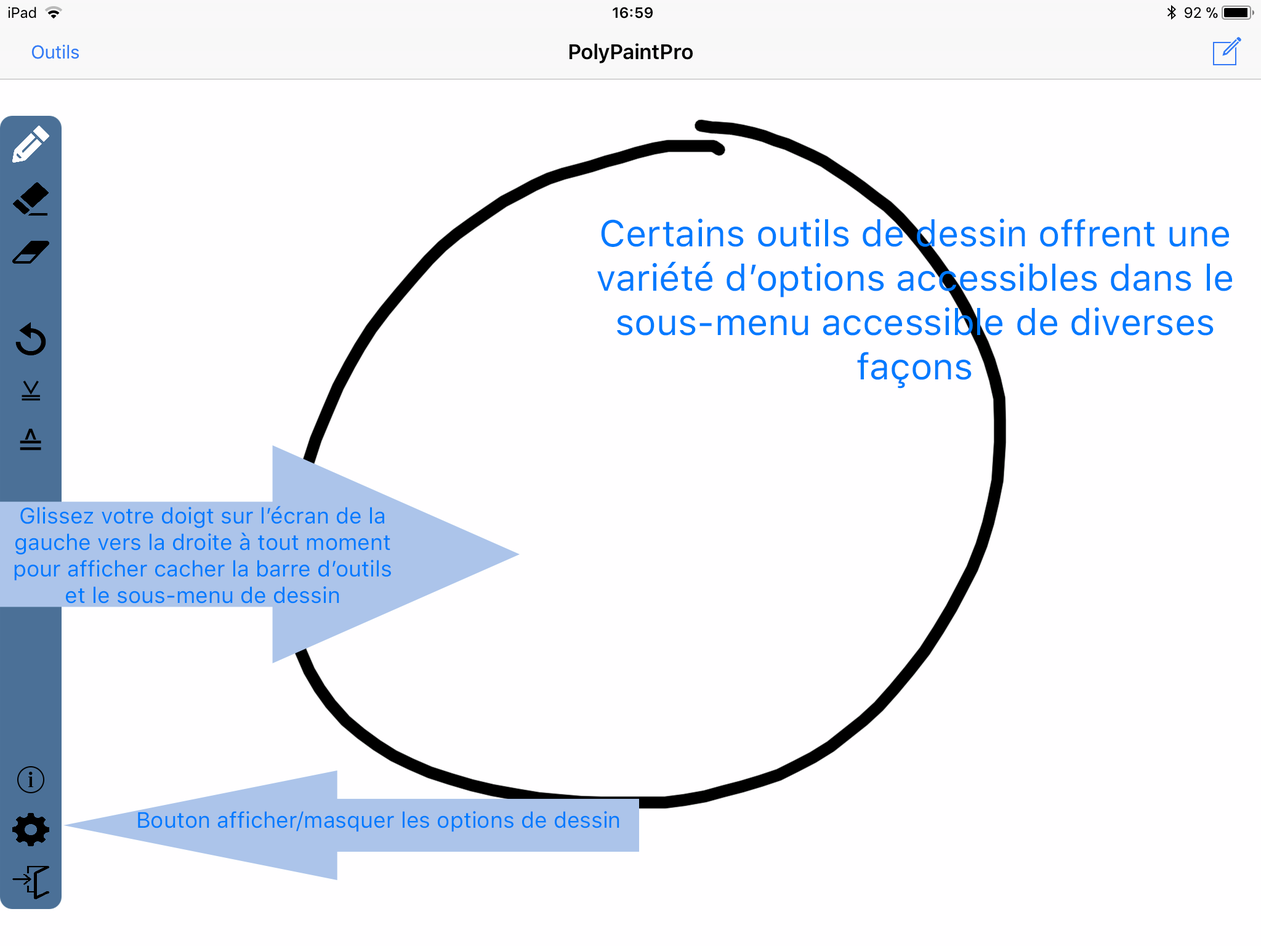
<style>
.page{position:relative;width:1261px;height:946px;background:#fffeff}
.page>*{position:absolute;margin:0}
.t1{font:36.9px "SFProText-Regular";color:#007aff}
.t2{font:22.2px "SFProText-Regular";color:#007aff}
</style>
<div class="page">
<p class="t1" style="left:597px;top:219px;width:635px;height:169px;text-align:center">Certains outils de dessin offrent une variété d’options accessibles dans le sous-menu accessible de diverses façons</p>
<p class="t2" style="left:14px;top:505px;width:377px;height:98px;text-align:center">Glissez votre doigt sur l’écran de la gauche vers la droite à tout moment pour afficher cacher la barre d’outils et le sous-menu de dessin</p>
<p class="t2" style="left:138px;top:811px;width:481px;height:21px">Bouton afficher/masquer les options de dessin</p>
</div>
